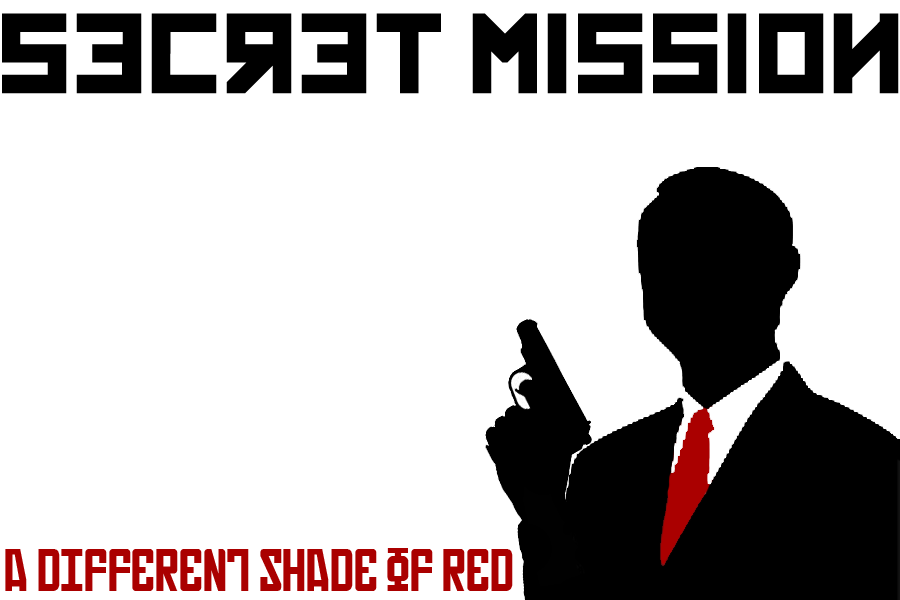
<style>
.page{position:relative;width:900px;height:600px;background:#ffffff}
.page>*{position:absolute;margin:0}
.t1{font:108.3px "Kremlin";color:#000000}
.t2{font:50px "Russian";color:#aa0000}
</style>
<div class="page">
<p class="t1" style="left:2px;top:13px;width:897px;height:81px">secret mission</p>
<p class="t2" style="left:5px;top:548px;width:508px;height:43px">a different shade of red</p>
</div>
